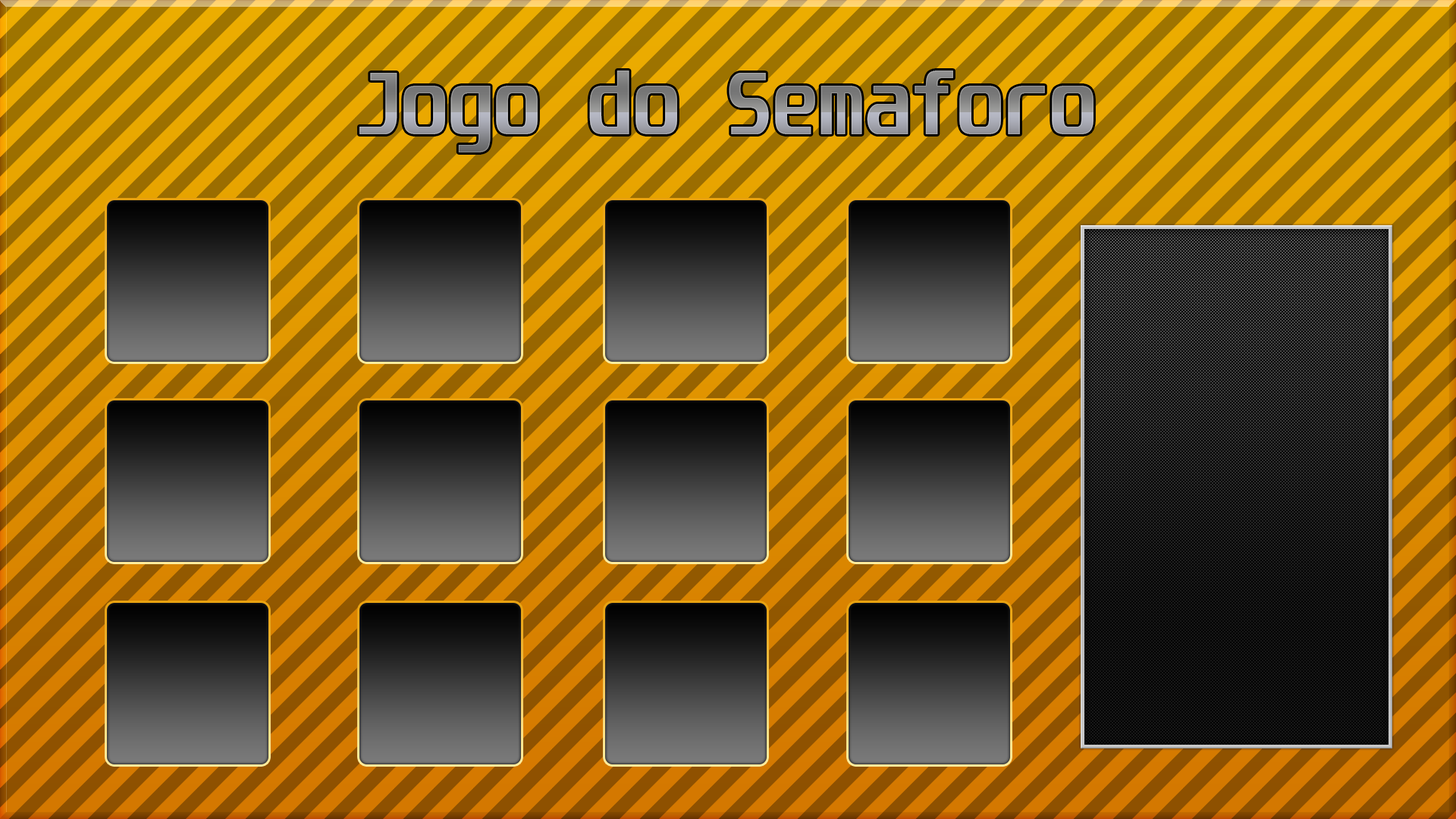
<style>
.page{position:relative;width:1456px;height:819px}
.page>*{position:absolute;margin:0}
.t1{font:75.8px "Unispace-Bold"}
</style>
<div class="page">
<p class="t1" style="left:359px;top:71px;width:735px;height:81px">Jogo do Semaforo</p>
</div>
